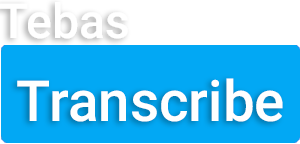
<style>
.page{position:relative;width:300px;height:144px;background:#02a8f4}
.page>*{position:absolute;margin:0}
.t1{font:48px "Roboto-Medium";color:#ffffff}
.t2{font:56.5px "Roboto-Medium";color:#ffffff}
</style>
<div class="page">
<p class="t1" style="left:0px;top:2px;width:128px;height:37px">Tebas</p>
<p class="t2" style="left:17px;top:78px;width:266px;height:44px">Transcribe</p>
</div>
